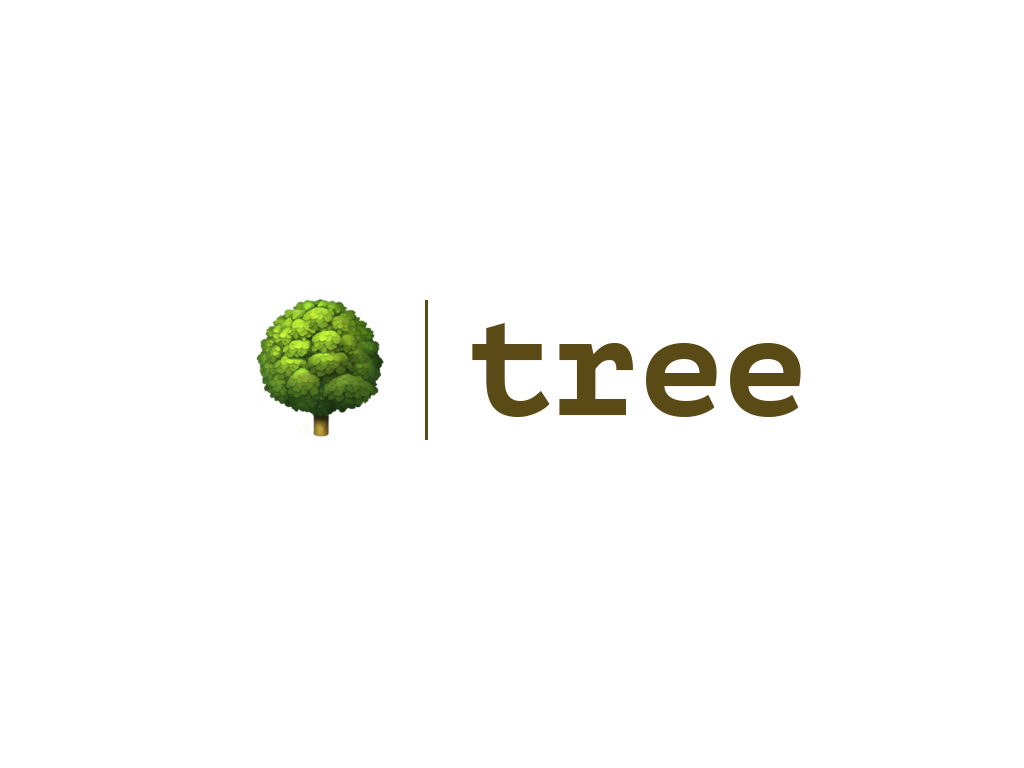
<style>
.page{position:relative;width:1024px;height:768px;background:#ffffff}
.page>*{position:absolute;margin:0}
.t1{font:141px "PTMono-Bold";color:#5a4a15}
</style>
<div class="page">
<p class="t1" style="left:472px;top:323px;width:329px;height:94px">tree</p>
</div>
